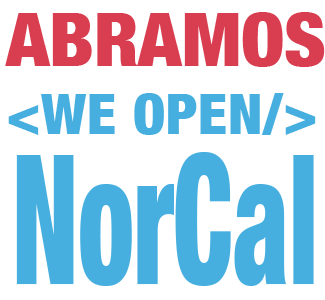
<style>
.page{position:relative;width:325px;height:300px;background:#ffffff}
.page>*{position:absolute;margin:0}
.t1{font:55.8px/65.1px "HelveticaNeue-CondensedBlack";letter-spacing:0.01em;color:#46afdf;scale:1.05 1}
.t2{font:74.5px/55.8px "HelveticaNeue-CondensedBlack";color:#d93d50;scale:1.05 1}
.t3{font:181.4px "HelveticaNeue-CondensedBlack";color:#46afdf;scale:0.62 1}
</style>
<div class="page">
<p class="t1" style="left:5px;top:12px;width:320px;height:123px"><span class="t2">ABRAMOS<br></span>&lt;WE OPEN/&gt;</p>
<p class="t3" style="left:16px;top:152px;width:298px;height:134px">NorCal</p>
</div>
